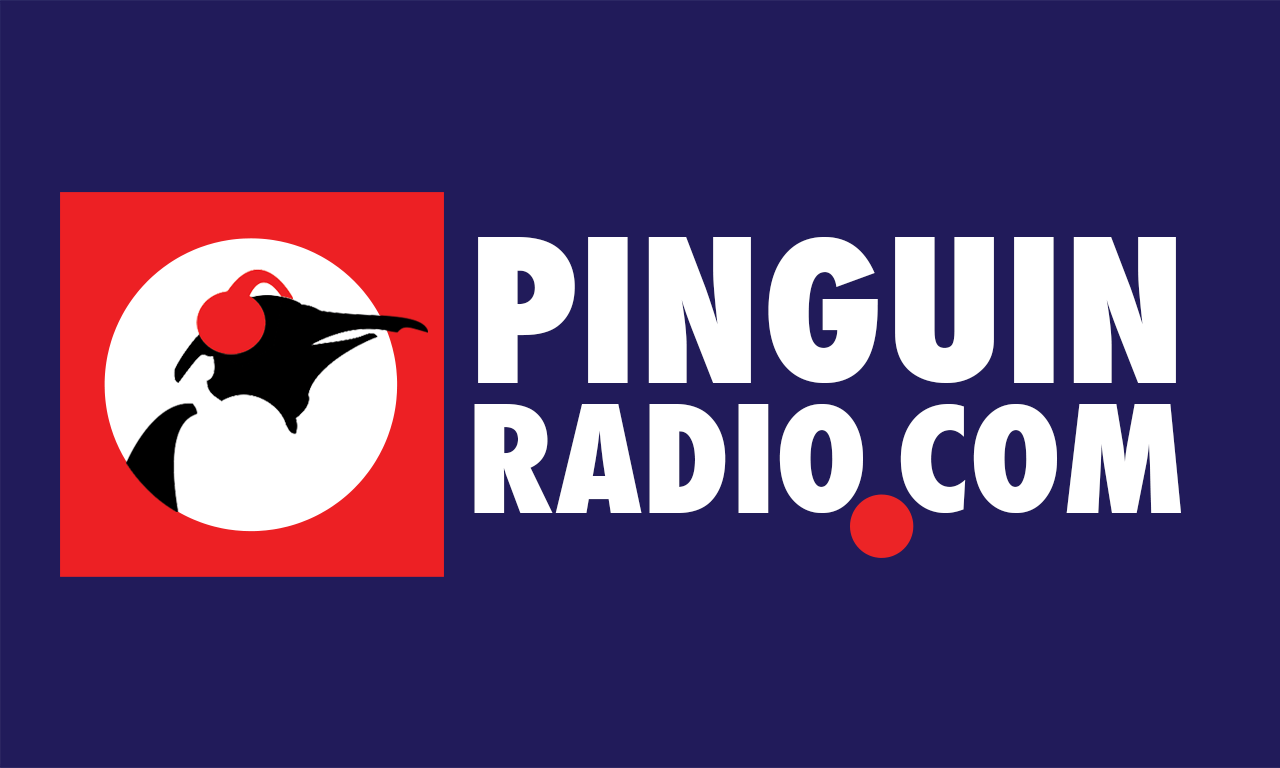
<style>
.page{position:relative;width:1280px;height:768px;background:#211b5a}
.page>*{position:absolute;margin:0}
.t1{font:193.1px "Futura-CondensedExtraBold";color:#ffffff}
.t2{font:145.3px "Futura-CondensedExtraBold";color:#ffffff}
</style>
<div class="page">
<p class="t1" style="left:478px;top:237px;width:698px;height:146px">PINGUIN</p>
<p class="t2" style="left:474px;top:404px;width:389px;height:109px">RADIO</p>
<p class="t2" style="left:900px;top:404px;width:281px;height:109px">COM</p>
</div>
